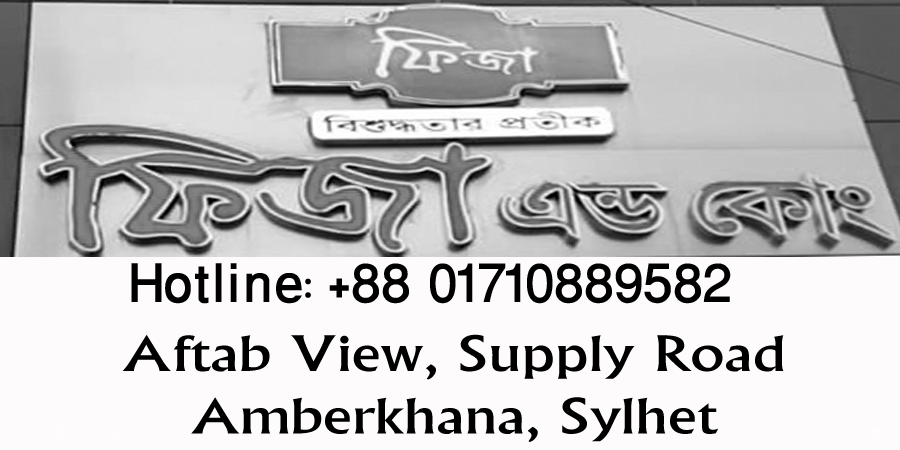
<style>
.page{position:relative;width:900px;height:450px;background:#fdfbfb}
.page>*{position:absolute;margin:0}
.t1{font:75px "WinSoftPro-Medium";color:#000000}
.t2{font:52.1px "Narkisim";color:#000000;scale:1.29 1}
</style>
<div class="page">
<p class="t1" style="left:131px;top:263px;width:600px;height:41px">Hotline: +88 01710889582</p>
<p class="t2" style="left:122px;top:334px;width:662px;height:108px;text-align:center">Aftab View, Supply Road<br>Amberkhana, Sylhet</p>
</div>
